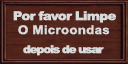
<style>
.page{position:relative;width:128px;height:64px}
.page>*{position:absolute;margin:0}
.t1{font:12px "Arial-Black";letter-spacing:-0.055em;color:#dadada;scale:1.11 1}
.t2{font:12px "Arial-BoldMT";letter-spacing:0.02em;color:#dadada;scale:1.11 1}
.t3{font:10.8px "Arial-Black";letter-spacing:-0.1em;color:#dadada;scale:1.11 1}
</style>
<div class="page">
<p class="t1" style="left:13px;top:11px;width:103px;height:12px">Por favor Limpe</p>
<p class="t2" style="left:18px;top:25px;width:92px;height:10px">O Microondas</p>
<p class="t3" style="left:23px;top:45px;width:81px;height:11px">depois de usar</p>
</div>
